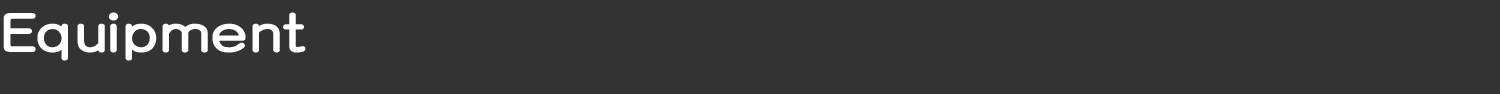
<style>
.page{position:relative;width:1500px;height:94px;background:#333333}
.page>*{position:absolute;margin:0}
.t1{font:51.8px "IwataMaruGothicW55-D";color:#ffffff;scale:1.14 1}
</style>
<div class="page">
<p class="t1" style="left:3px;top:12px;width:303px;height:49px">Equipment</p>
</div>
